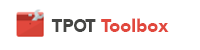
<style>
.page{position:relative;width:200px;height:50px;background:#ffffff}
.page>*{position:absolute;margin:0}
.t1{font:18px "Avenir-Black";color:#e1483d}
.t2{font:18px "Avenir-Black";color:#454543}
.t3{font:18px "Avenir-Black";letter-spacing:-0.1em;color:#454543;scale:0.9 1}
</style>
<div class="page">
<p class="t1" style="left:51px;top:18px;width:118px;height:14px"><span class="t2">TP</span><span class="t3">O</span><span class="t2">T </span>Toolbox</p>
</div>
